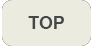
<style>
.page{position:relative;width:92px;height:46px;background:#ecebdf}
.page>*{position:absolute;margin:0}
.t1{font:18px "Almarai-Bold";color:#44484b}
</style>
<div class="page">
<p class="t1" style="left:28px;top:16px;width:36px;height:13px">TOP</p>
</div>
